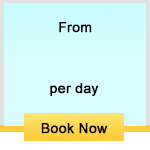
<style>
.page{position:relative;width:150px;height:150px;background:#d8fcff}
.page>*{position:absolute;margin:0}
.t1{font:14px "ArialMT";color:#000000;font-weight:bold}
</style>
<div class="page">
<p class="t1" style="left:59px;top:22px;width:33px;height:11px">From</p>
<p class="t1" style="left:50px;top:83px;width:49px;height:13px">per day</p>
<p class="t1" style="left:41px;top:123px;width:67px;height:11px">Book Now</p>
</div>
